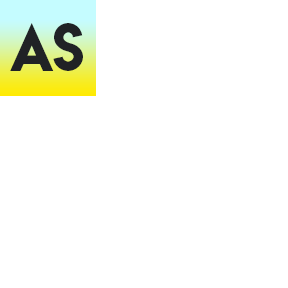
<style>
.page{position:relative;width:288px;height:288px;background:#ffffff}
.page>*{position:absolute;margin:0}
.t1{font:60px "LemonMilk";color:#202225}
</style>
<div class="page">
<p class="t1" style="left:10px;top:23px;width:73px;height:48px">AS</p>
</div>
